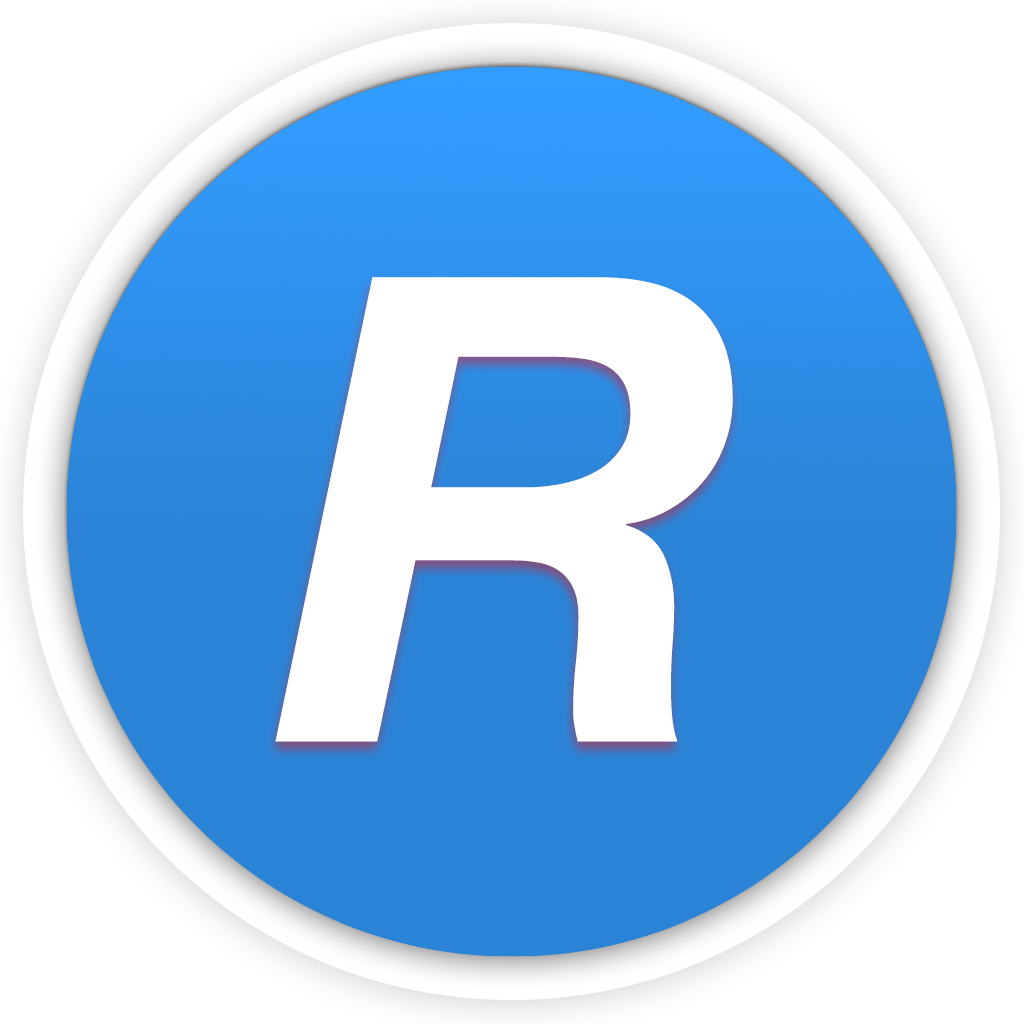
<style>
.page{position:relative;width:1024px;height:1024px;background:#ffffff}
.page>*{position:absolute;margin:0}
.t1{font:650px "HelveticaNeue-BoldItalic";letter-spacing:-0.025em;color:#ffffff}
</style>
<div class="page">
<p class="t1" style="left:275px;top:277px;width:458px;height:465px">R</p>
</div>
